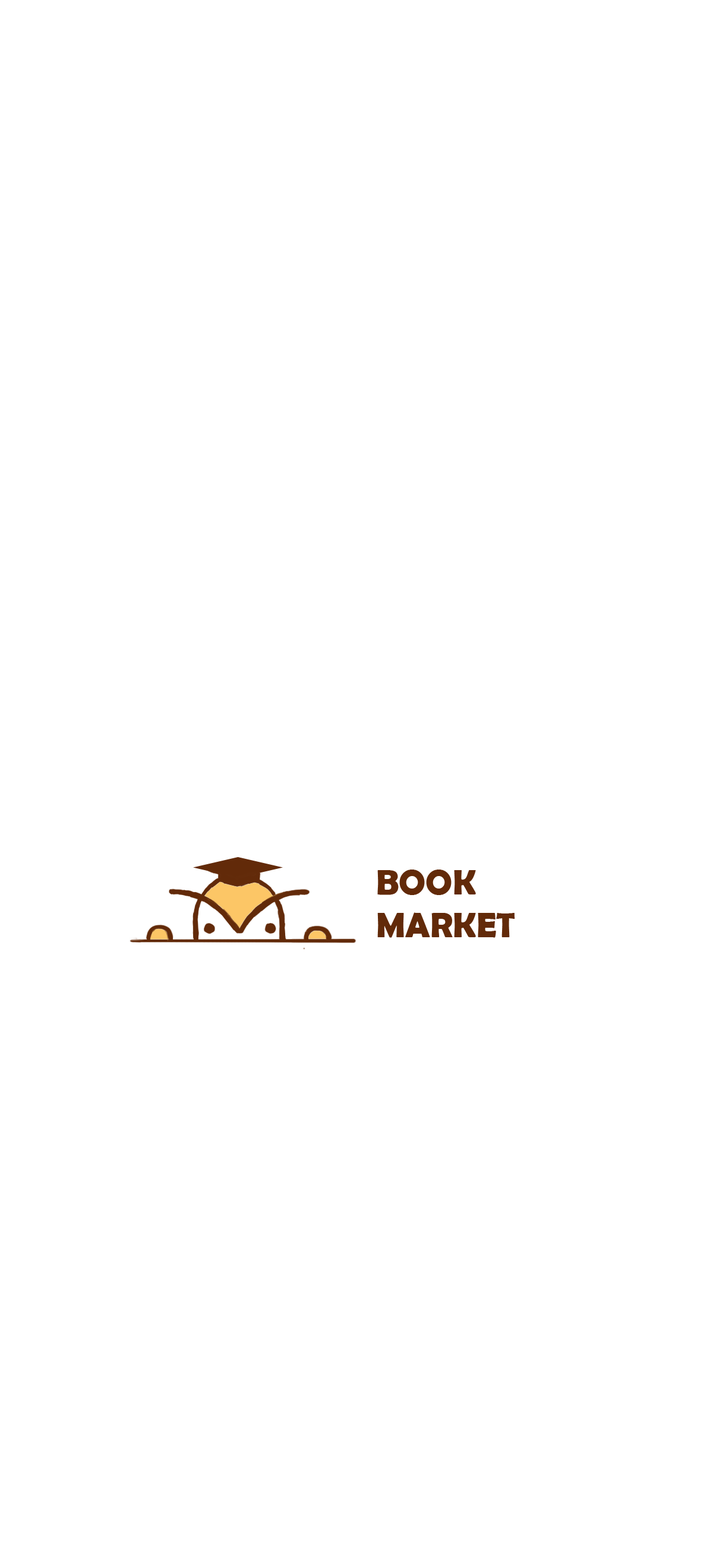
<style>
.page{position:relative;width:713px;height:1568px;background:#ffffff}
.page>*{position:absolute;margin:0}
.t1{font:35.6px/21.4px "BerlinSansFBDemi-Bold";color:#622a09}
</style>
<div class="page">
<p class="t1" style="left:377px;top:870px;width:138px;height:68px">BOOK <br><br>MARKET</p>
</div>
